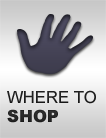
<style>
.page{position:relative;width:106px;height:138px}
.page>*{position:absolute;margin:0}
.t1{font:16.7px "ArialMT";color:#292929}
.t2{font:16.7px "Arial-Black";color:#292929}
</style>
<div class="page">
<p class="t1" style="left:7px;top:90px;width:89px;height:14px">WHERE TO</p>
<p class="t2" style="left:7px;top:109px;width:51px;height:14px">SHOP</p>
</div>
